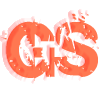
<style>
.page{position:relative;width:100px;height:100px;background:#ffffff}
.page>*{position:absolute;margin:0}
.t1{font:70.3px "Base02";color:#ff7851;scale:0.94 1}
</style>
<div class="page">
<p class="t1" style="left:1px;top:13px;width:98px;height:68px">GS</p>
</div>
